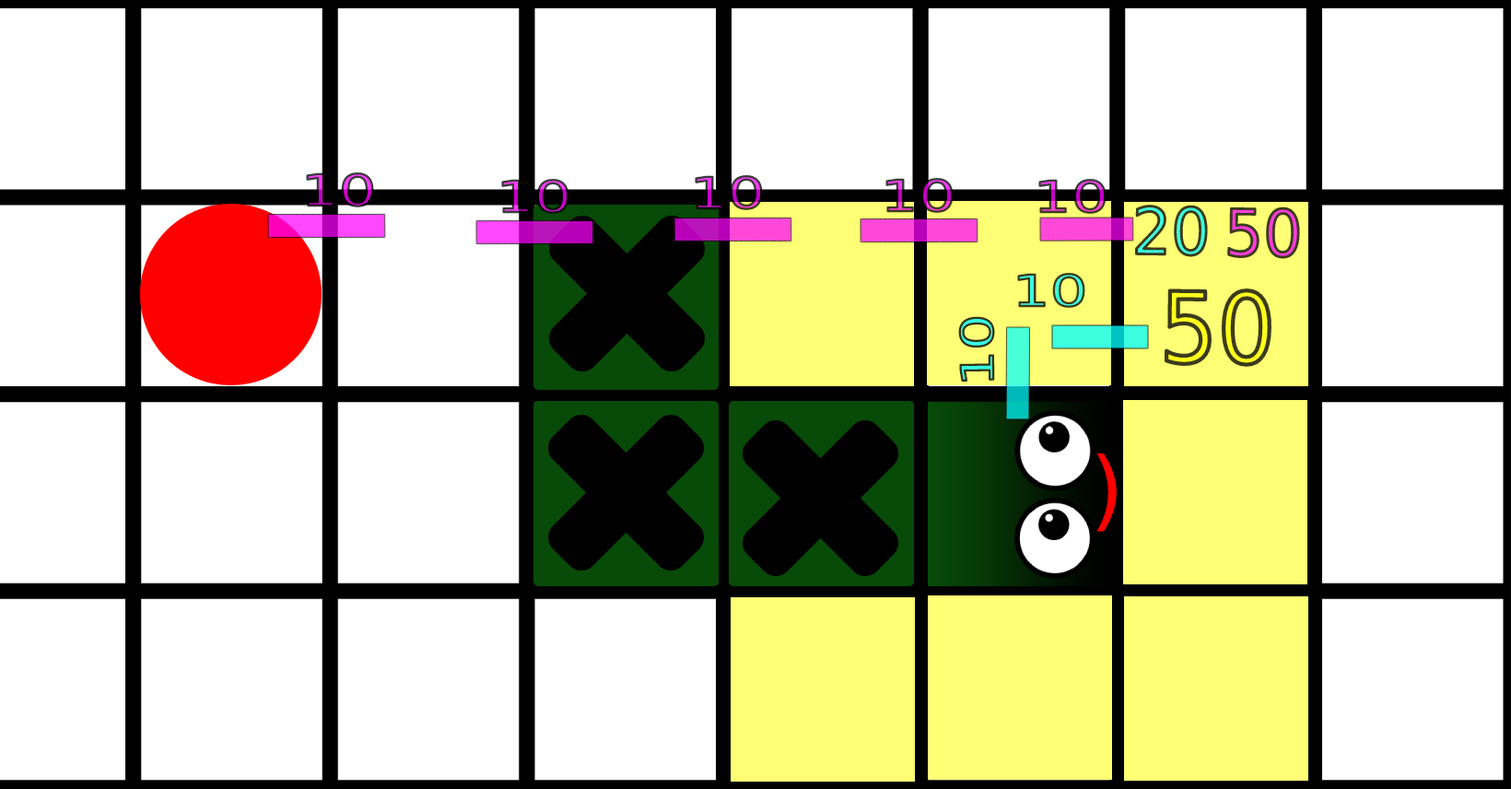
<style>
.page{position:relative;width:1511px;height:789px;background:#ffffff}
.page>*{position:absolute;margin:0}
.t1{font:43.2px "DejaVuSans";scale:1.38 1}
.t2{font:64.6px "DejaVuSans";scale:0.95 1}
.t3{font:98px "DejaVuSans";scale:0.93 1}
.t4{font:44.6px "DejaVuSans";scale:1.28 1}
.t5{font:87.5px "DejaVuSans";color:#ff0000}
</style>
<div class="page">
<p class="t1" style="left:1039px;top:179px;width:68px;height:35px">10</p>
<p class="t2" style="left:1135px;top:205px;width:73px;height:52px;rotate:1deg">20</p>
<p class="t2" style="left:1228px;top:206px;width:72px;height:53px;rotate:1deg">50</p>
<p class="t1" style="left:1017px;top:273px;width:69px;height:35px">10</p>
<p class="t3" style="left:1164px;top:288px;width:110px;height:80px;rotate:1deg">50</p>
<p class="t4" style="left:958px;top:316px;width:37px;height:66px;rotate:-91deg">10</p>
<p class="t5" style="left:1097px;top:453px;width:20px;height:79px">)</p>
</div>
